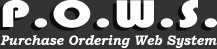
<style>
.page{position:relative;width:217px;height:49px;background:#333333}
.page>*{position:absolute;margin:0}
.t1{font:40px "Bauhaus93";letter-spacing:0.02em;color:#ffffff;scale:1.32 1}
.t2{font:14px "BookmanOldStyle-BoldItalic";letter-spacing:0.02em;color:#ffffff;scale:0.9 1}
</style>
<div class="page">
<p class="t1" style="left:2px;top:0px;width:215px;height:28px">P.O.W.S.</p>
<p class="t2" style="left:0px;top:35px;width:217px;height:13px">Purchase Ordering Web System</p>
</div>
